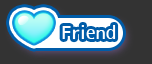
<style>
.page{position:relative;width:152px;height:64px;background:#333333}
.page>*{position:absolute;margin:0}
.t1{font:18px "JK-Gothic-M";color:#ffffff}
</style>
<div class="page">
<p class="t1" style="left:62px;top:25px;width:54px;height:15px">Friend</p>
</div>
